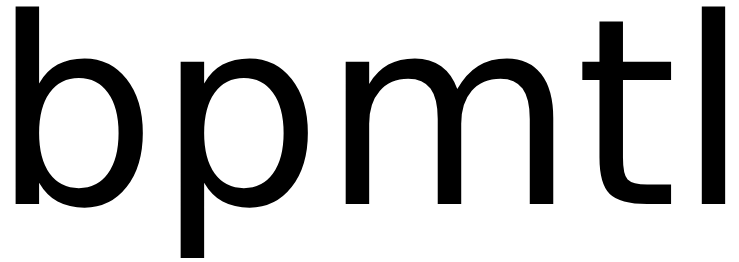
<style>
.page{position:relative;width:739px;height:262px;background:#ffffff}
.page>*{position:absolute;margin:0}
.t1{font:260px "LEMONMILK-Regular";color:#000000}
</style>
<div class="page">
<p class="t1" style="left:15px;top:6px;width:711px;height:253px">bpmtl</p>
</div>
